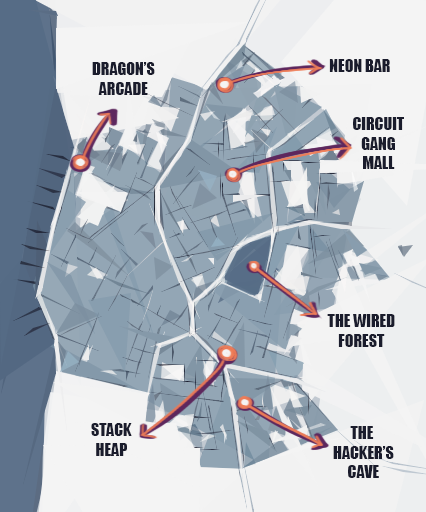
<style>
.page{position:relative;width:426px;height:512px}
.page>*{position:absolute;margin:0}
.t1{font:16px "Impact";color:#1a1c2c}
</style>
<div class="page">
<p class="t1" style="left:92px;top:62px;width:63px;height:33px;text-align:center">DRAGON’S<br>ARCADE</p>
<p class="t1" style="left:329px;top:59px;width:61px;height:13px">NEON BAR</p>
<p class="t1" style="left:353px;top:117px;width:51px;height:52px;text-align:center">CIRCUIT<br>GANG<br>MALL</p>
<p class="t1" style="left:327px;top:314px;width:68px;height:33px;text-align:center">THE WIRED<br>FOREST</p>
<p class="t1" style="left:91px;top:423px;width:41px;height:33px;text-align:center">STACK<br>HEAP</p>
<p class="t1" style="left:333px;top:426px;width:61px;height:52px;text-align:center">THE <br>HACKER’S<br>CAVE</p>
</div>
